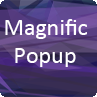
<style>
.page{position:relative;width:97px;height:97px}
.page>*{position:absolute;margin:0}
.t1{font:24px "Calibri";color:#ffffff}
</style>
<div class="page">
<p class="t1" style="left:5px;top:19px;width:82px;height:20px">Magnific</p>
<p class="t1" style="left:15px;top:48px;width:61px;height:19px">Popup</p>
</div>
